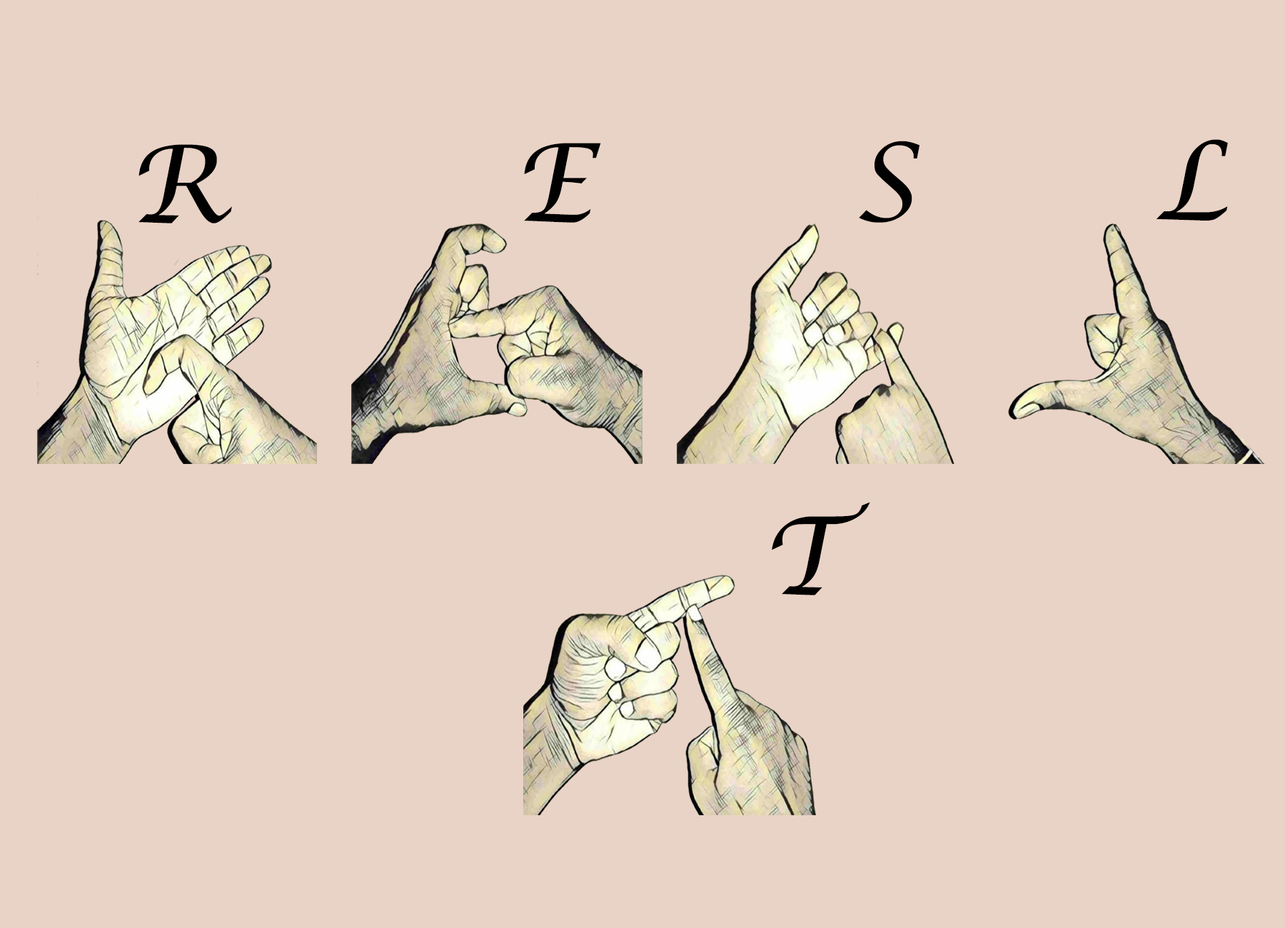
<style>
.page{position:relative;width:1285px;height:928px;background:#e9d3c6}
.page>*{position:absolute;margin:0}
.t1{font:107.1px "LucidaCalligraphy-Italic";color:#010101}
</style>
<div class="page">
<p class="t1" style="left:138px;top:144px;width:94px;height:79px">R</p>
<p class="t1" style="left:524px;top:143px;width:77px;height:80px">E</p>
<p class="t1" style="left:859px;top:141px;width:60px;height:82px">S</p>
<p class="t1" style="left:1156px;top:139px;width:72px;height:82px">L</p>
<p class="t1" style="left:772px;top:502px;width:98px;height:93px">T</p>
</div>
